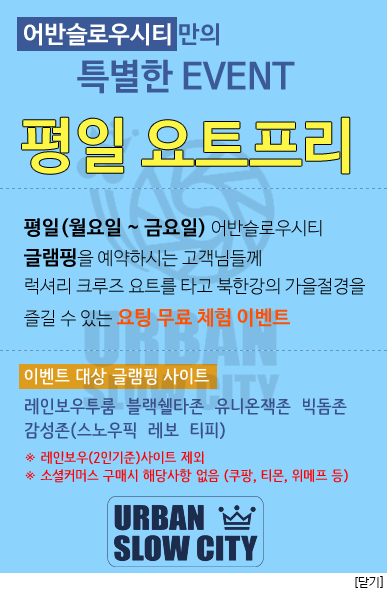
<style>
.page{position:relative;width:387px;height:590px;background:#8cd3fd}
.page>*{position:absolute;margin:0}
.t1{font:36px/30px "NanumBarunGothicBold";color:#3b5a97}
.t2{font:24px/30px "NanumBarunGothicBold";color:#fefeff}
.t3{font:24px/30px "NanumBarunGothicBold";color:#3b5a97}
.t4{font:60px "NanumBarunGothicBold";color:#fcf746}
.t5{font:24px "NanumBarunGothicBold";color:#ff0000}
.t6{font:18px/30px "NanumBarunGothicLight";color:#000000}
.t7{font:20px/30px "NanumBarunGothicBold";color:#000000}
.t8{font:20px/30px "NanumBarunGothicBold";color:#ff4f01}
.t9{font:18px/30px "NanumBarunpen-Bold";color:#ffffff;scale:1.1 1}
.t10{font:18px/24px "NanumBarunpen-Bold";color:#3a5089;scale:1.1 1}
.t11{font:18px/30px "NanumBarunpen-Bold";color:#3a5089;scale:1.1 1}
.t12{font:14px/18px "NanumBarunpen-Bold";color:#ff0000;scale:1.1 1}
.t13{font:14px/30px "NanumBarunpen-Bold";color:#ff0000;scale:1.1 1}
.t14{font:12px "NanumBarunGothicLight";color:#000000}
</style>
<div class="page">
<p class="t1" style="left:24px;top:23px;width:271px;height:71px"><span class="t2">어반슬로우시티 </span><span class="t3">만의 <br><br>          </span>특별한 EVENT</p>
<p class="t4" style="left:22px;top:117px;width:328px;height:57px"><span class="t5"><br></span>평일 요트프리</p>
<p class="t6" style="left:24px;top:218px;width:341px;height:265px"><span class="t7">평일(월요일 ~ 금요일)</span> 어반슬로우시티<br><span class="t7">글램핑</span>을 예약하시는 고객님들께<br>럭셔리 크루즈 요트를 타고 북한강의 가을절경을<br>즐길 수 있는 <span class="t8">요팅 무료 체험 이벤트<br><br></span><span class="t9">이벤트 대상 글램핑 사이트<br></span><span class="t10">레인보우투룸  블랙쉘타존  유니온잭존  빅돔존<br>감성존</span><span class="t11">(스노우픽  레보  티피) <br></span><span class="t12">※ 레인보우(2인기준)사이트 제외<br>※ 소셜</span><span class="t13">커머스 구매시 해당사항 없음 (쿠팡, 티몬, 위메프 등)</span></p>
<p class="t14" style="left:355px;top:576px;width:28px;height:12px">[닫기]</p>
</div>
